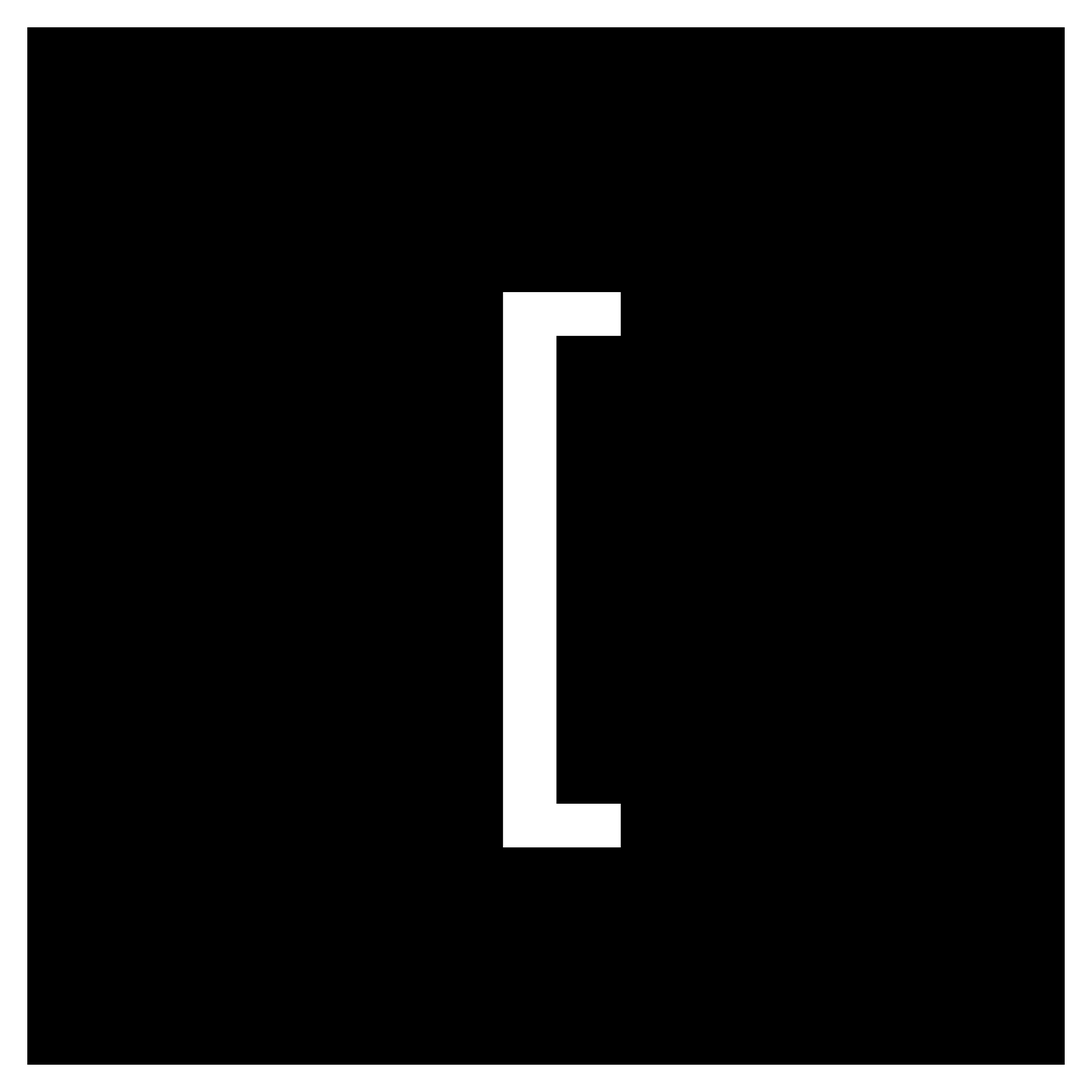
<style>
.page{position:relative;width:1092px;height:1092px;background:#000000}
.page>*{position:absolute;margin:0}
.t1{font:606.7px "ArialMT";color:#ffffff}
</style>
<div class="page">
<p class="t1" style="left:503px;top:292px;width:118px;height:555px">[</p>
</div>
